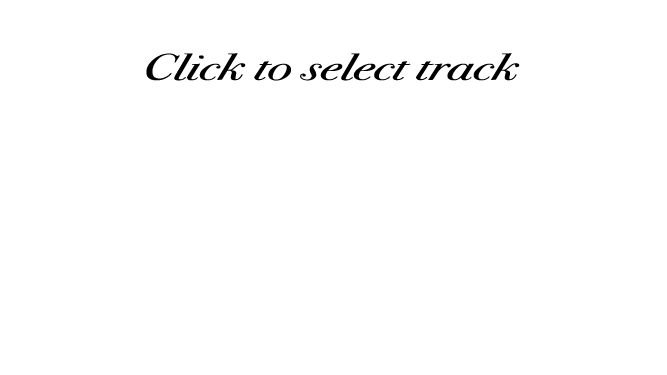
<style>
.page{position:relative;width:667px;height:375px;background:#ffffff}
.page>*{position:absolute;margin:0}
.t1{font:63.7px "BodoniSvtyTwoITCTT-BookIta";color:#000000;scale:1.43 1}
</style>
<div class="page">
<p class="t1" style="left:146px;top:53px;width:374px;height:28px">Click to select track</p>
</div>
